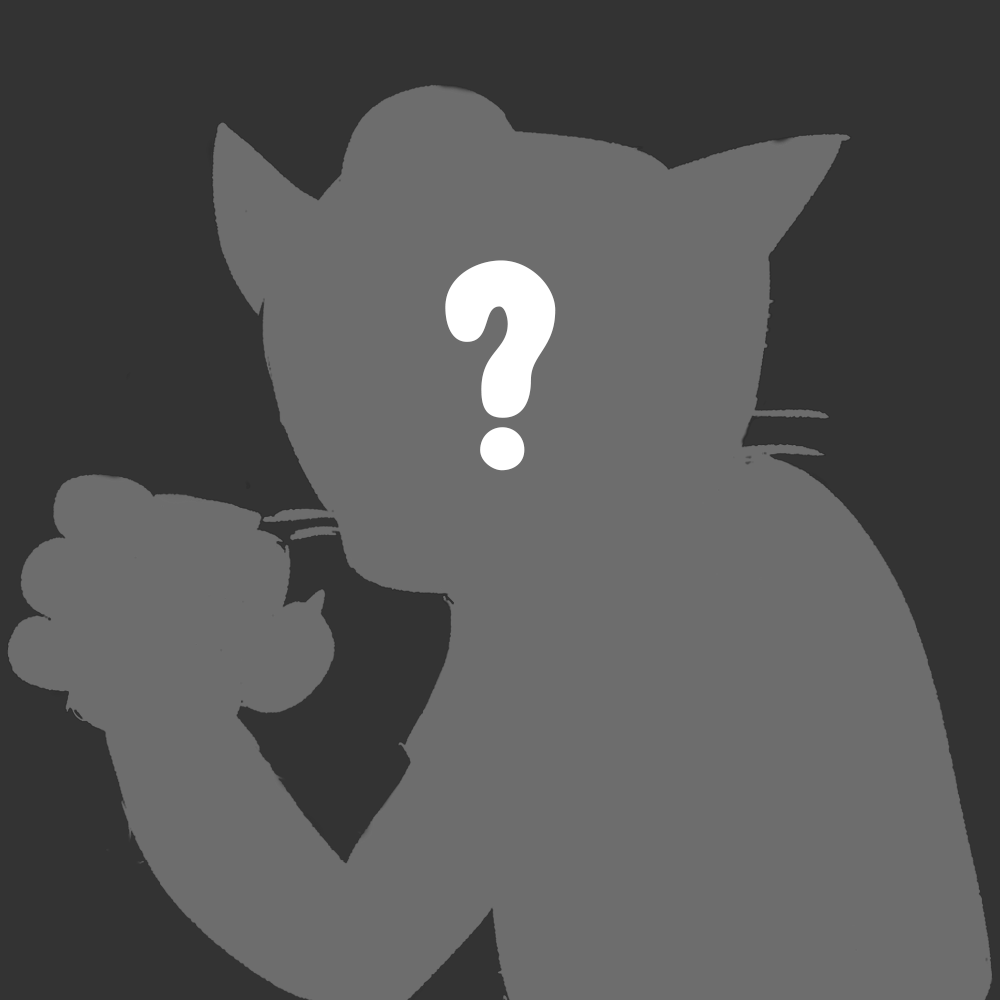
<style>
.page{position:relative;width:1000px;height:1000px;background:#6d6d6d}
.page>*{position:absolute;margin:0}
.t1{font:300px "PaindeMie-Regular";color:#ffffff}
</style>
<div class="page">
<p class="t1" style="left:445px;top:260px;width:111px;height:211px">?</p>
</div>
